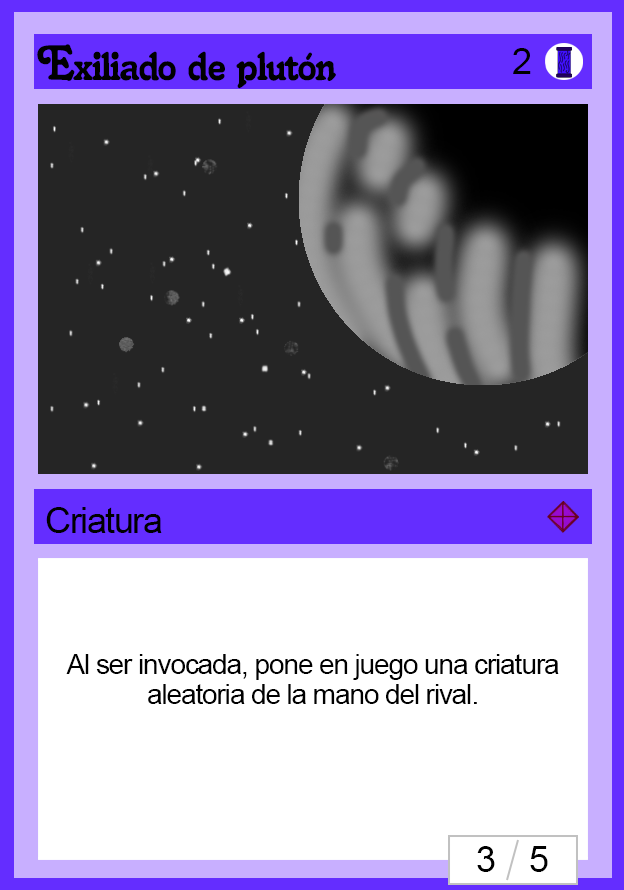
<style>
.page{position:relative;width:624px;height:890px;background:#ffffff}
.page>*{position:absolute;margin:0}
.t1{font:48px "Salina";letter-spacing:-0.04em;color:#000000}
.t2{font:36px "ArialMT";letter-spacing:-0.04em;color:#000000}
.t3{font:28px/30px "ArialMT";letter-spacing:-0.04em;color:#000000}
</style>
<div class="page">
<p class="t1" style="left:37px;top:44px;width:299px;height:45px">Exiliado de plutón</p>
<p class="t2" style="left:513px;top:48px;width:18px;height:26px">2</p>
<p class="t2" style="left:46px;top:507px;width:116px;height:26px">Criatura</p>
<p class="t3" style="left:66px;top:654px;width:493px;height:50px;text-align:center">Al ser invocada, pone en juego una criatura aleatoria de la mano del rival.</p>
<p class="t2" style="left:477px;top:846px;width:71px;height:26px">3    5</p>
</div>
